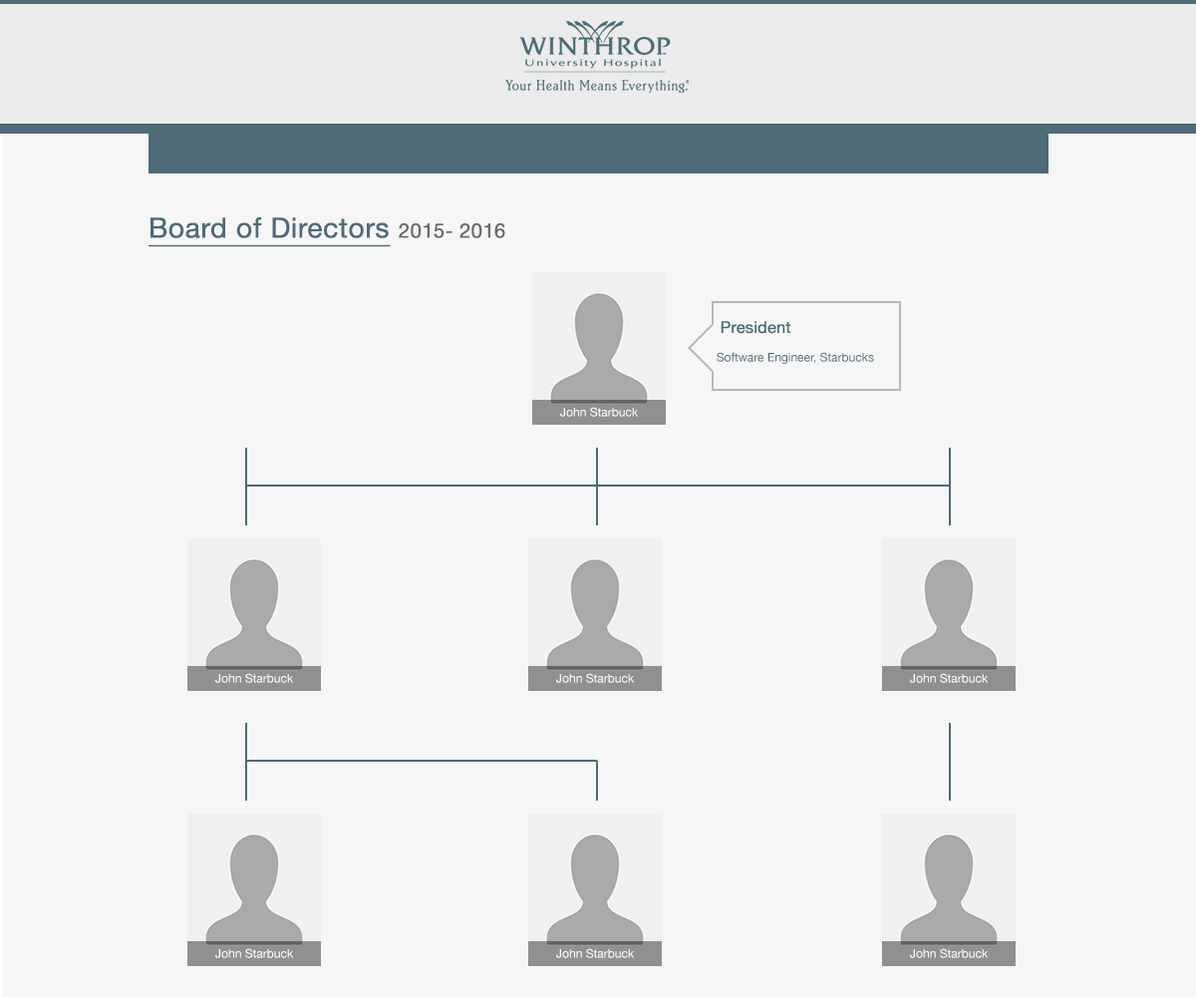
<style>
.page{position:relative;width:1196px;height:997px;background:#f6f6f6}
.page>*{position:absolute;margin:0}
.t1{font:27.9px "HelveticaNeue";color:#4c6b77;font-weight:bold;text-decoration:underline}
.t2{font:19.9px "HelveticaNeue";color:#696b6c;font-weight:bold}
.t3{font:12px "HelveticaNeue";color:#4c6b77}
.t4{font:15.9px "HelveticaNeue";color:#4c6b77;font-weight:bold}
.t5{font:12px "HelveticaNeue";color:#ffffff}
</style>
<div class="page">
<p class="t1" style="left:149px;top:217px;width:356px;height:30px">Board of Directors <span class="t2">2015- 2016</span></p>
<p class="t3" style="left:717px;top:321px;width:157px;height:43px"><span class="t4">President<br></span><br>   Software Engineer, Starbucks</p>
<p class="t5" style="left:560px;top:407px;width:79px;height:10px">John Starbuck</p>
<p class="t5" style="left:215px;top:673px;width:79px;height:10px">John Starbuck</p>
<p class="t5" style="left:556px;top:673px;width:79px;height:10px">John Starbuck</p>
<p class="t5" style="left:910px;top:673px;width:79px;height:10px">John Starbuck</p>
<p class="t5" style="left:215px;top:948px;width:79px;height:10px">John Starbuck</p>
<p class="t5" style="left:556px;top:948px;width:79px;height:10px">John Starbuck</p>
<p class="t5" style="left:910px;top:948px;width:79px;height:10px">John Starbuck</p>
</div>
